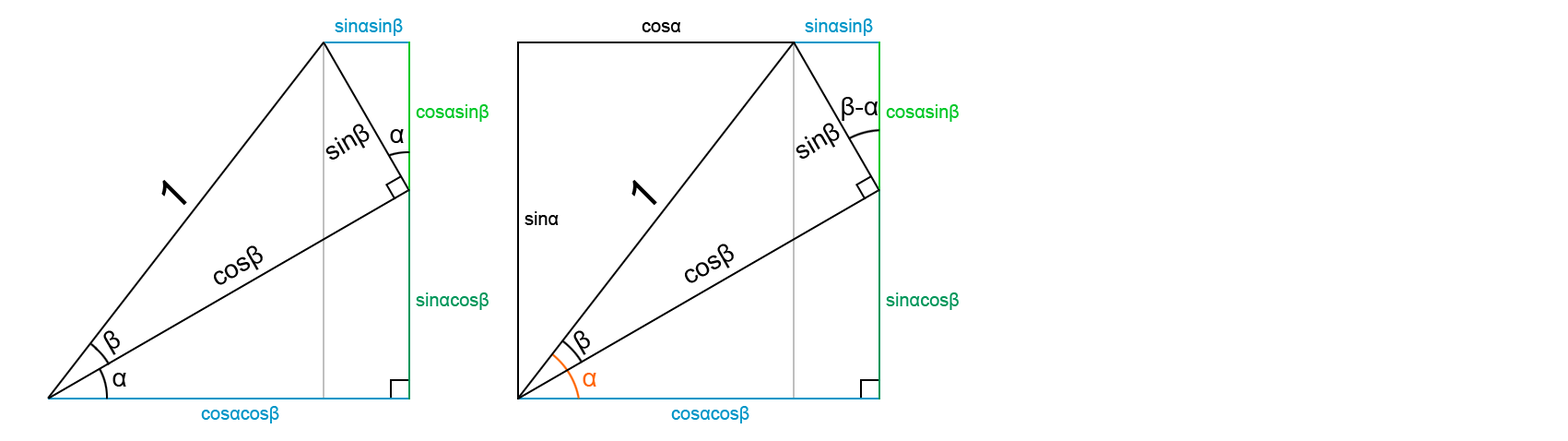
<style>
.page{position:relative;width:1568px;height:441px;background:#ffffff}
.page>*{position:absolute;margin:0}
.t1{font:18.4px "ArialMT";color:#0096c8}
.t2{font:18.4px "ArialMT";color:#000000}
.t3{font:25.8px "ArialMT";color:#000000}
.t4{font:18.4px "ArialMT";color:#00c828}
.t5{font:44.3px "ArialMT";color:#000000}
.t6{font:18.4px "ArialMT";color:#00965a}
.t7{font:25.8px "ArialMT";color:#ff6400}
</style>
<div class="page">
<p class="t1" style="left:335px;top:18px;width:68px;height:18px">sinαsinβ</p>
<p class="t2" style="left:642px;top:22px;width:38px;height:10px">cosα</p>
<p class="t1" style="left:805px;top:18px;width:68px;height:18px">sinαsinβ</p>
<p class="t3" style="left:842px;top:97px;width:36px;height:24px">β-α</p>
<p class="t4" style="left:416px;top:104px;width:73px;height:18px">cosαsinβ</p>
<p class="t4" style="left:886px;top:104px;width:73px;height:18px">cosαsinβ</p>
<p class="t3" style="left:325px;top:124px;width:45px;height:35px;rotate:-30deg">sinβ</p>
<p class="t3" style="left:796px;top:123px;width:44px;height:36px;rotate:-30deg">sinβ</p>
<p class="t3" style="left:390px;top:129px;width:14px;height:14px">α</p>
<p class="t5" style="left:161px;top:180px;width:26px;height:26px;rotate:-45deg">1</p>
<p class="t5" style="left:631px;top:180px;width:26px;height:26px;rotate:-45deg">1</p>
<p class="t2" style="left:525px;top:211px;width:34px;height:14px">sinα</p>
<p class="t3" style="left:214px;top:245px;width:49px;height:40px;rotate:-30deg">cosβ</p>
<p class="t3" style="left:685px;top:243px;width:49px;height:40px;rotate:-30deg">cosβ</p>
<p class="t6" style="left:416px;top:292px;width:73px;height:18px">sinαcosβ</p>
<p class="t6" style="left:886px;top:292px;width:73px;height:18px">sinαcosβ</p>
<p class="t3" style="left:103px;top:330px;width:17px;height:25px;rotate:-30deg">β</p>
<p class="t3" style="left:573px;top:330px;width:17px;height:25px;rotate:-30deg">β</p>
<p class="t3" style="left:112px;top:372px;width:14px;height:14px">α</p>
<p class="t7" style="left:583px;top:372px;width:13px;height:14px">α</p>
<p class="t1" style="left:201px;top:406px;width:78px;height:17px">cosαcosβ</p>
<p class="t1" style="left:671px;top:406px;width:78px;height:17px">cosαcosβ</p>
</div>
